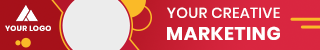
<style>
.page{position:relative;width:320px;height:50px}
.page>*{position:absolute;margin:0}
.t1{font:14.6px "Poppins-Medium";letter-spacing:0.025em;color:#ffffff}
.t2{font:7.5px "Poppins-Bold";letter-spacing:0.025em;color:#fefefe}
.t3{font:18.6px "Poppins-Bold";letter-spacing:0.025em;color:#ffffff}
</style>
<div class="page">
<p class="t1" style="left:167px;top:7px;width:113px;height:11px">YOUR CREATIVE</p>
<p class="t2" style="left:5px;top:25px;width:46px;height:6px">YOUR LOGO</p>
<p class="t3" style="left:167px;top:26px;width:113px;height:14px">MARKETING</p>
</div>
